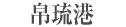
<style>
.page{position:relative;width:126px;height:27px;background:#ffffff}
.page>*{position:absolute;margin:0}
.t1{font:24px "RyuminPro-ExBold";color:#4c4843;scale:0.9 1}
</style>
<div class="page">
<p class="t1" style="left:31px;top:2px;width:63px;height:23px">帛琉港</p>
</div>
